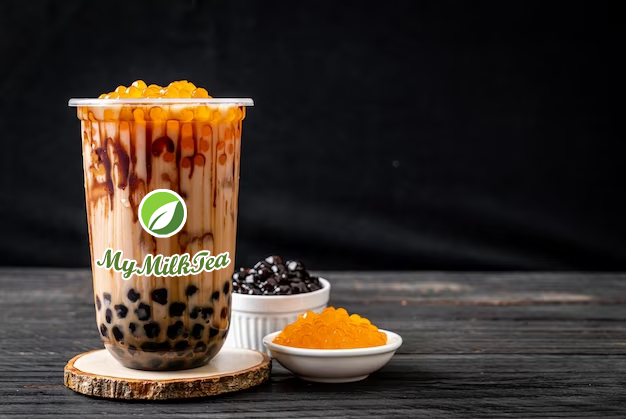
<style>
.page{position:relative;width:626px;height:419px}
.page>*{position:absolute;margin:0}
.t1{font:26.3px "ScriptMTBold";color:#577a28}
</style>
<div class="page">
<p class="t1" style="left:96px;top:249px;width:133px;height:30px">MyMilkTea</p>
</div>
